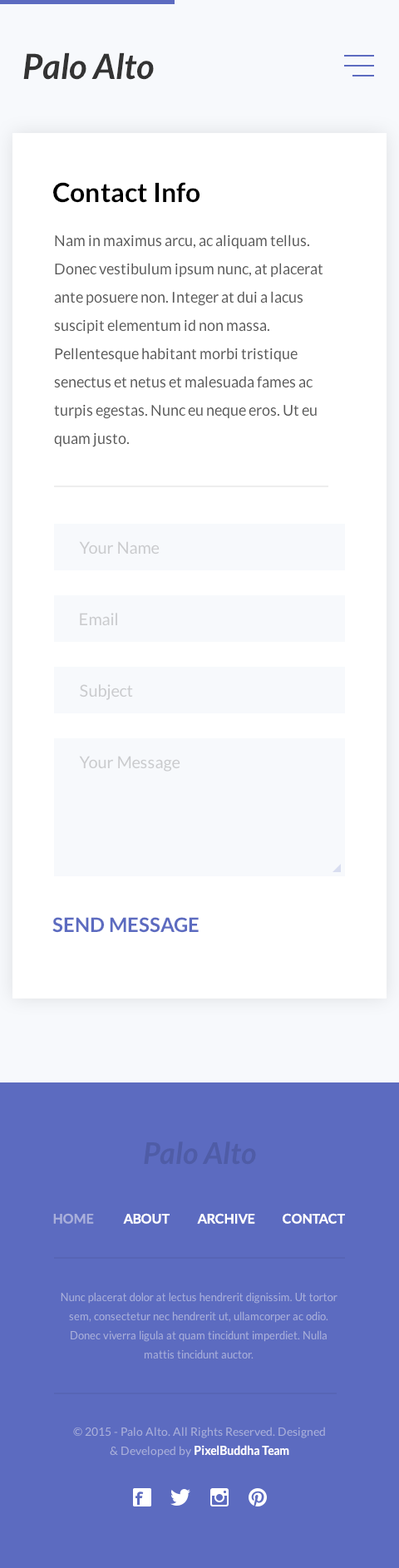
<style>
.page{position:relative;width:399px;height:1568px;background:#ffffff}
.page>*{position:absolute;margin:0}
.t1{font:34.9px "Lato-BoldItalic";color:#333333}
.t2{font:26.6px "Lato-Bold";color:#000000}
.t3{font:15px/28.3px "Lato-Regular";color:#585858}
.t4{font:16.6px "Lato-Regular";color:#cacbcd}
.t5{font:20px "Lato-Bold";color:#5c6bc0;text-transform:uppercase}
.t6{font:29.9px "Lato-BoldItalic";color:#4f5ca6}
.t7{font:13.3px "Lato-Bold";color:#a9afdb;text-transform:uppercase}
.t8{font:13.3px "Lato-Bold";color:#ffffff;text-transform:uppercase}
.t9{font:10.8px/19.1px "Lato-Regular";color:#a9afdb}
.t10{font:11.6px/19.1px "Lato-Regular"}
.t11{font:11.6px/19.1px "Lato-Bold"}
.t12{font:11.6px "Lato-Bold";color:#ffffff}
</style>
<div class="page">
<p class="t1" style="left:23px;top:52px;width:131px;height:28px">Palo Alto</p>
<p class="t2" style="left:53px;top:182px;width:147px;height:21px">Contact Info</p>
<p class="t3" style="left:54px;top:234px;width:269px;height:213px">Nam in maximus arcu, ac aliquam tellus. Donec vestibulum ipsum nunc, at placerat ante posuere non. Integer at dui a lacus suscipit elementum id non massa. Pellentesque habitant morbi tristique senectus et netus et malesuada fames ac turpis egestas. Nunc eu neque eros. Ut eu quam justo.</p>
<p class="t4" style="left:79px;top:541px;width:81px;height:14px">Your Name</p>
<p class="t4" style="left:80px;top:613px;width:37px;height:13px">Email</p>
<p class="t4" style="left:80px;top:684px;width:53px;height:16px">Subject</p>
<p class="t4" style="left:79px;top:756px;width:101px;height:16px">Your Message</p>
<p class="t5" style="left:52px;top:917px;width:147px;height:16px">send message</p>
<p class="t6" style="left:144px;top:1141px;width:112px;height:24px">Palo Alto</p>
<p class="t7" style="left:53px;top:1213px;width:41px;height:11px">home</p>
<p class="t8" style="left:123px;top:1213px;width:222px;height:11px">about           archive           contact</p>
<p class="t9" style="left:61px;top:1292px;width:277px;height:67px;text-align:center">Nunc placerat dolor at lectus hendrerit dignissim. Ut tortor sem, consectetur nec hendrerit ut, ullamcorper ac odio. Donec viverra ligula at quam tincidunt imperdiet. Nulla mattis tincidunt auctor.</p>
<p class="t10" style="left:73px;top:1427px;width:252px;height:30px;text-align:center">© 2015 - Palo Alto. All Rights Reserved. Designed <br>&amp; Developed by <span class="t11">PixelBuddha Team</span></p>
<p class="t12" style="left:195px;top:1445px;width:94px;height:11px">PixelBuddha Team</p>
</div>
